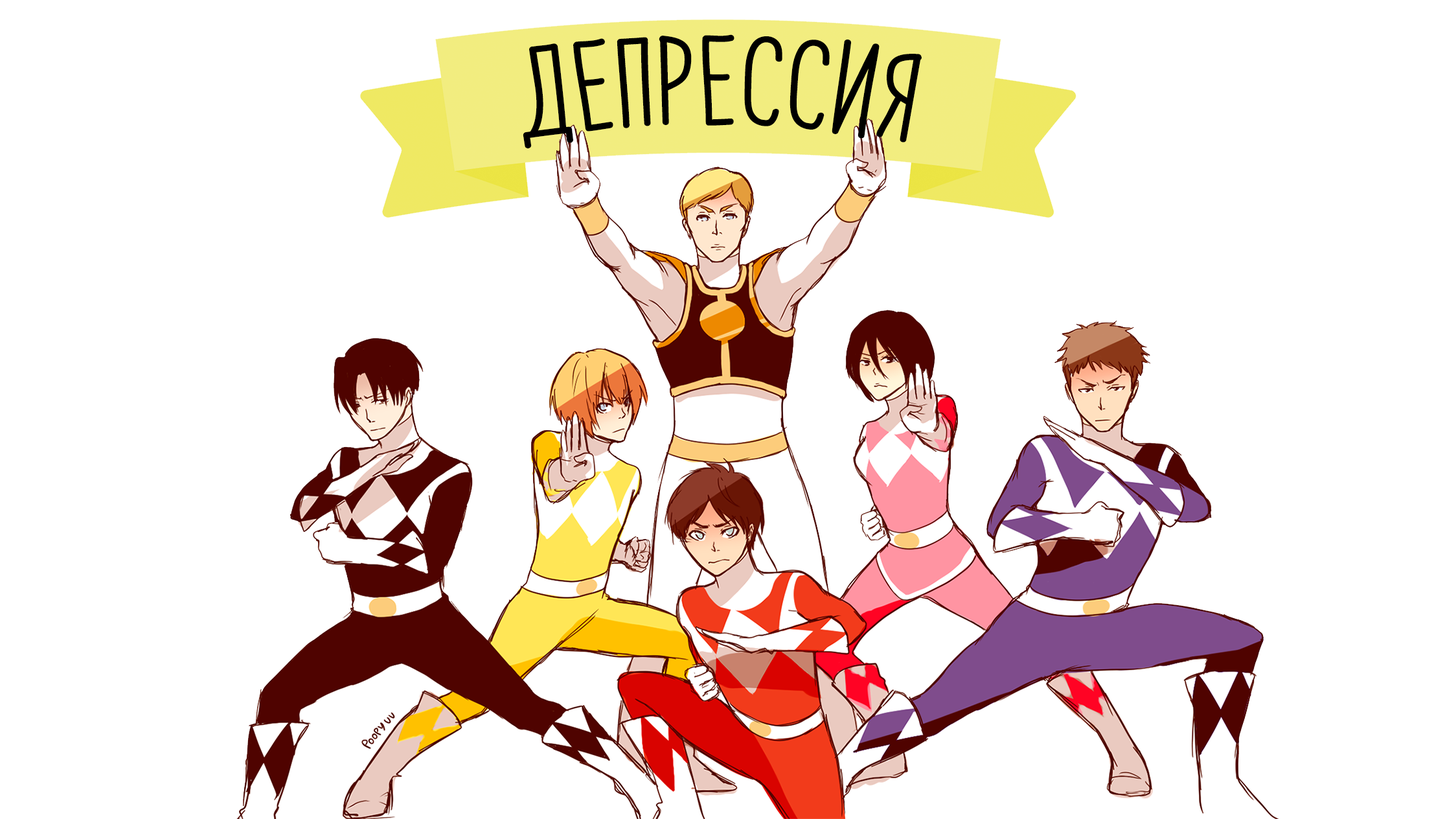
<style>
.page{position:relative;width:1456px;height:819px;background:#ffffff}
.page>*{position:absolute;margin:0}
.t1{font:77.7px "PapayaSunrise";color:#000000}
</style>
<div class="page">
<p class="t1" style="left:523px;top:34px;width:399px;height:114px;rotate:1deg">депрессия</p>
</div>
